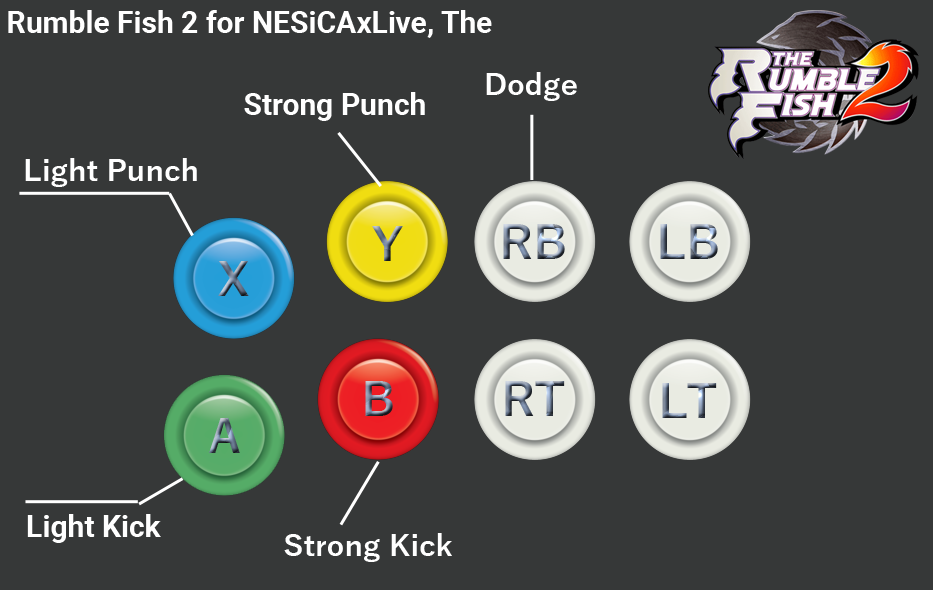
<style>
.page{position:relative;width:933px;height:590px;background:#363838}
.page>*{position:absolute;margin:0}
.t1{font:30px "Roboto-Bold";color:#ffffff}
.t2{font:30px "YuGothic-Bold";color:#ffffff}
</style>
<div class="page">
<p class="t1" style="left:8px;top:10px;width:484px;height:28px">Rumble Fish 2 for NESiCAxLive, The</p>
<p class="t2" style="left:486px;top:72px;width:91px;height:29px">Dodge</p>
<p class="t1" style="left:244px;top:92px;width:181px;height:29px">Strong Punch</p>
<p class="t2" style="left:25px;top:158px;width:172px;height:29px">Light Punch</p>
<p class="t1" style="left:27px;top:514px;width:134px;height:29px">Light Kick</p>
<p class="t2" style="left:284px;top:533px;width:168px;height:29px">Strong Kick</p>
</div>
